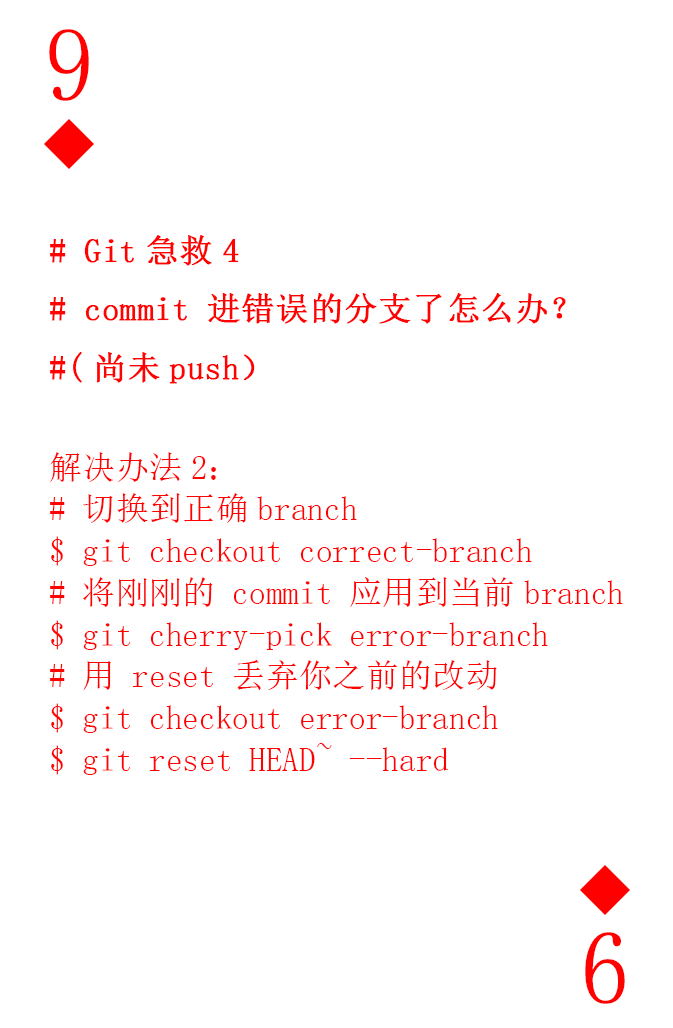
<style>
.page{position:relative;width:673px;height:1028px;background:#ffffff}
.page>*{position:absolute;margin:0}
.t1{font:104.2px "SimSun-ExtB";color:#ff0101;scale:0.93 1}
.t2{font:33.3px/41.7px "SimSun";color:#ff0101}
.t3{font:33.3px "SimSun";color:#ff0101;font-weight:bold}
</style>
<div class="page">
<p class="t1" style="left:49px;top:29px;width:40px;height:72px">9</p>
<p class="t2" style="left:50px;top:235px;width:573px;height:540px"><span class="t3"># Git急救4<br># commit 进错误的分支了怎么办？<br>#(尚未push）<br></span><br>解决办法2：<br># 切换到正确branch<br>$ git checkout correct-branch<br># 将刚刚的 commit 应用到当前branch<br>$ git cherry-pick error-branch<br># 用 reset 丢弃你之前的改动<br>$ git checkout error-branch<br>$ git reset HEAD~ --hard</p>
<p class="t1" style="left:585px;top:932px;width:40px;height:72px;rotate:180deg">9</p>
</div>
